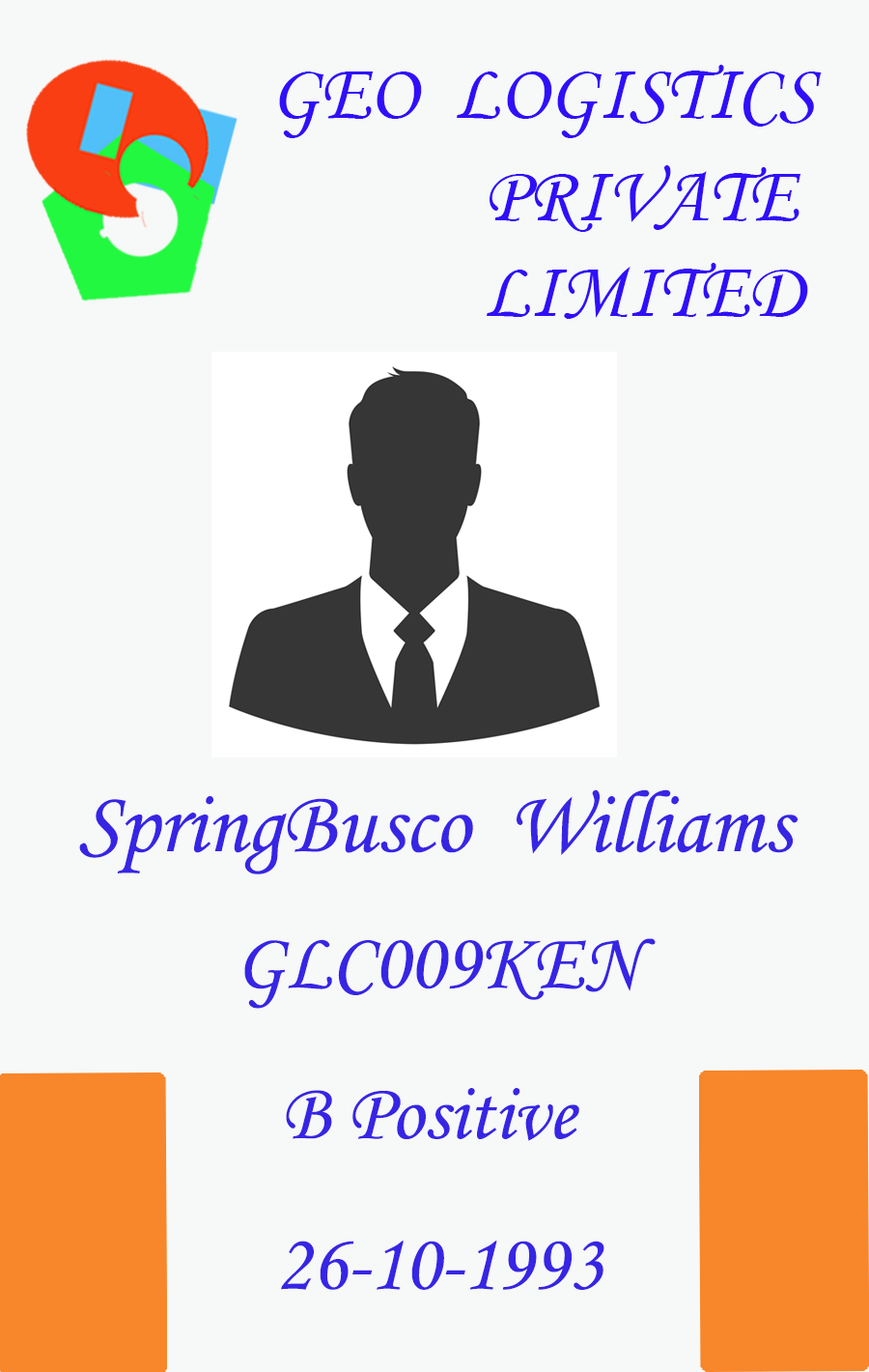
<style>
.page{position:relative;width:869px;height:1372px;background:#f7f8f8}
.page>*{position:absolute;margin:0}
.t1{font:80.5px "MonotypeCorsiva";color:#300ff8}
.t2{font:88.5px "MonotypeCorsiva";color:#3725e4}
.t3{font:80.5px "MonotypeCorsiva";color:#3725e4}
</style>
<div class="page">
<p class="t1" style="left:279px;top:65px;width:543px;height:73px">GEO  LOGISTICS</p>
<p class="t1" style="left:490px;top:165px;width:312px;height:67px">PRIVATE</p>
<p class="t1" style="left:487px;top:263px;width:321px;height:56px">LIMITED</p>
<p class="t2" style="left:79px;top:789px;width:720px;height:85px">SpringBusco  Williams</p>
<p class="t3" style="left:244px;top:938px;width:412px;height:70px">GLC009KEN</p>
<p class="t3" style="left:286px;top:1088px;width:294px;height:53px">B Positive</p>
<p class="t3" style="left:281px;top:1240px;width:324px;height:50px">26-10-1993</p>
</div>
